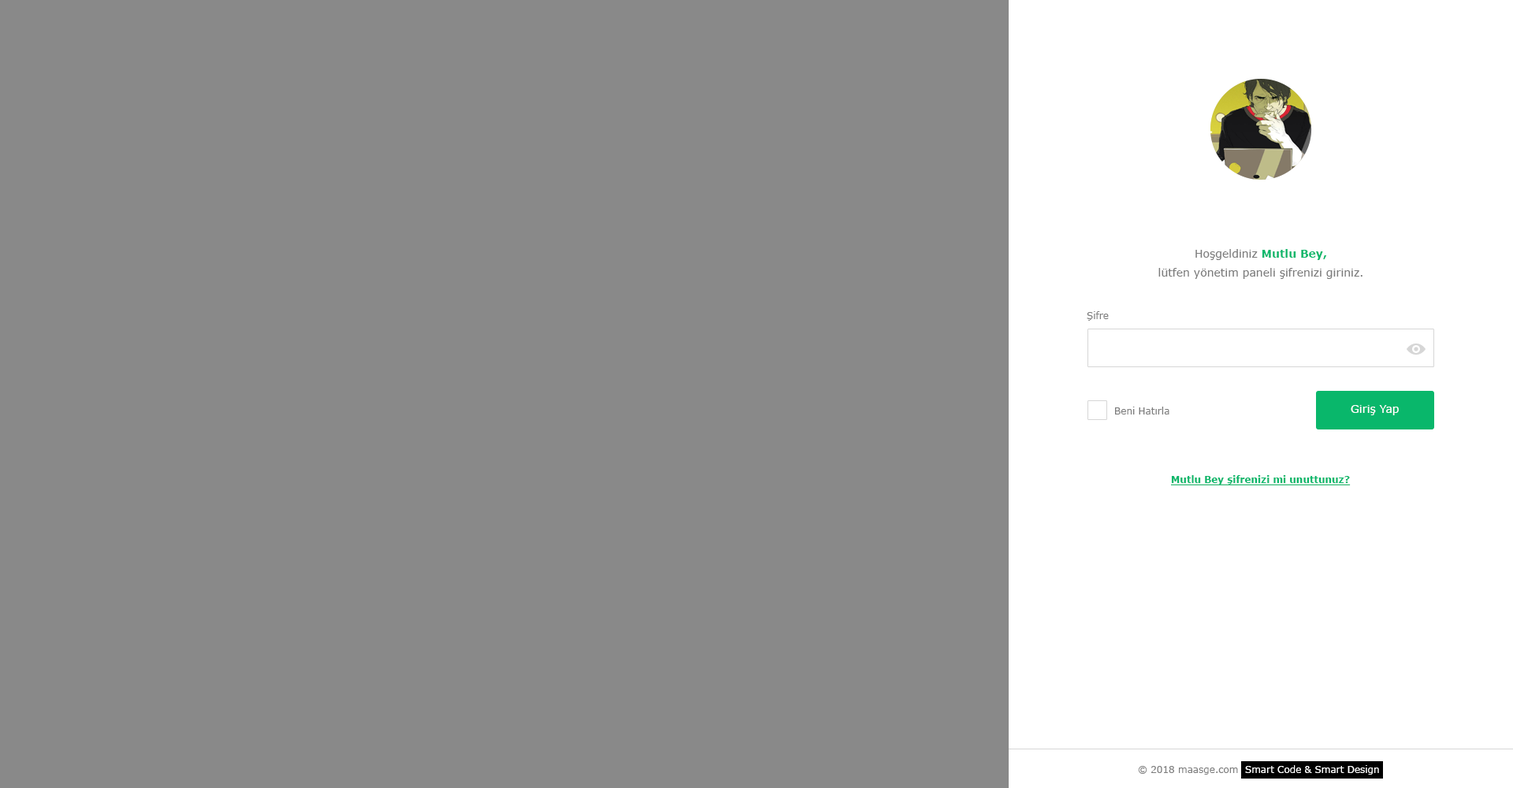
<style>
.page{position:relative;width:1513px;height:788px;background:#898989}
.page>*{position:absolute;margin:0}
.t1{font:11px/18.9px "Verdana";color:#7d7d7d}
.t2{font:11px/18.9px "Verdana-Bold";color:#09b76b}
.t3{font:9.5px "Verdana";color:#7d7d7d}
.t4{font:11px "Verdana";color:#ffffff}
.t5{font:9.5px "Verdana-Bold";color:#09b76b;text-decoration:underline}
</style>
<div class="page">
<p class="t1" style="left:1158px;top:249px;width:205px;height:30px;text-align:center">Hoşgeldiniz <span class="t2">Mutlu Bey,<br></span>lütfen yönetim paneli şifrenizi giriniz.</p>
<p class="t3" style="left:1087px;top:311px;width:22px;height:10px">Şifre</p>
<p class="t3" style="left:1115px;top:407px;width:54px;height:8px">Beni Hatırla</p>
<p class="t4" style="left:1351px;top:405px;width:48px;height:10px">Giriş Yap</p>
<p class="t5" style="left:1171px;top:475px;width:180px;height:10px">Mutlu Bey şifrenizi mi unuttunuz?</p>
</div>
